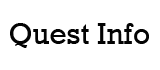
<style>
.page{position:relative;width:160px;height:70px;background:#ffffff}
.page>*{position:absolute;margin:0}
.t1{font:30px "Rockwell";color:#030303}
</style>
<div class="page">
<p class="t1" style="left:10px;top:23px;width:139px;height:25px">Quest Info</p>
</div>
